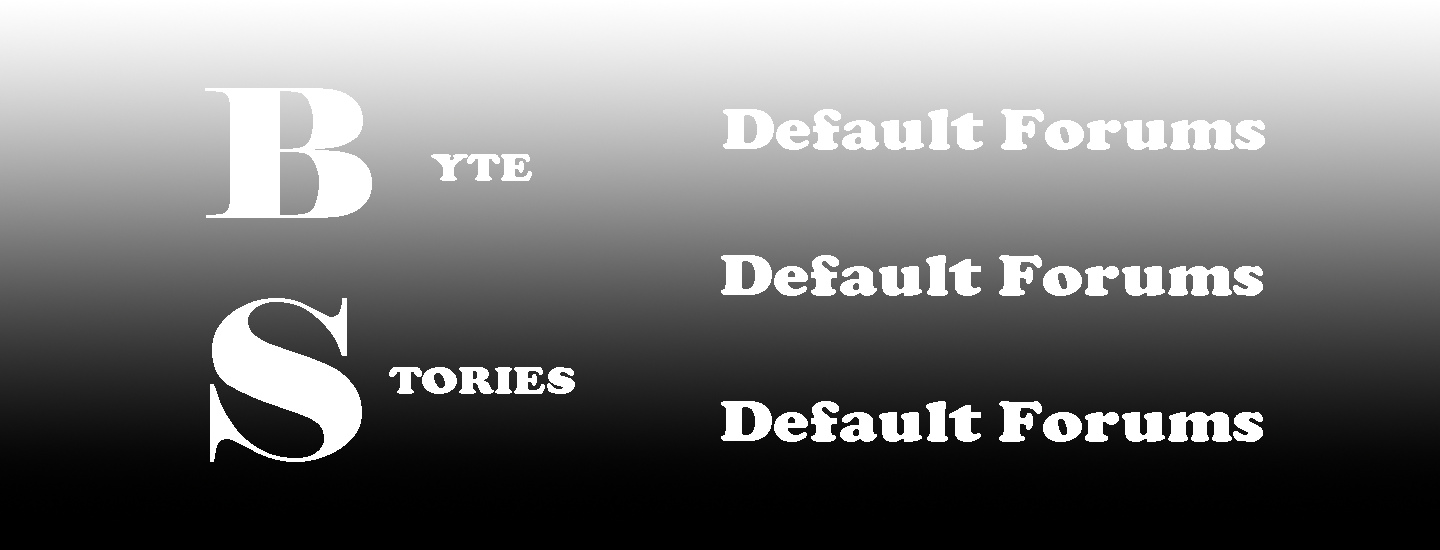
<style>
.page{position:relative;width:1440px;height:550px}
.page>*{position:absolute;margin:0}
.t1{font:177.5px "Elephant-Regular";color:#ffffff;scale:1.15 1}
.t2{font:59.5px "CooperBlack";color:#ffffff;scale:1.15 1}
.t3{font:40.8px "CooperBlack";color:#ffffff;scale:1.15 1}
.t4{font:218.8px "Elephant-Regular";color:#ffffff;scale:1.15 1}
</style>
<div class="page">
<p class="t1" style="left:205px;top:88px;width:167px;height:130px">B</p>
<p class="t2" style="left:723px;top:109px;width:542px;height:41px">Default Forums</p>
<p class="t3" style="left:431px;top:154px;width:101px;height:27px">YTE</p>
<p class="t2" style="left:721px;top:255px;width:542px;height:41px">Default Forums</p>
<p class="t4" style="left:210px;top:298px;width:152px;height:164px">S</p>
<p class="t3" style="left:389px;top:367px;width:186px;height:27px">TORIES</p>
<p class="t2" style="left:721px;top:401px;width:542px;height:41px">Default Forums</p>
</div>
